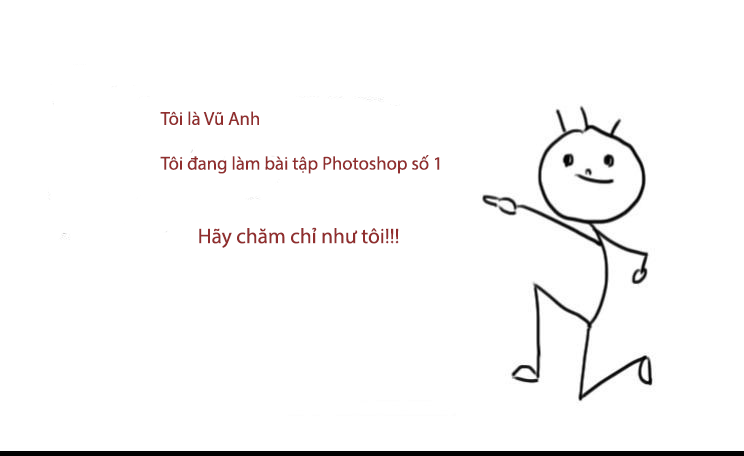
<style>
.page{position:relative;width:744px;height:456px;background:#ffffff}
.page>*{position:absolute;margin:0}
.t1{font:18.7px "MyriadPro-Regular";color:#912e2e}
.t2{font:21.3px "MyriadPro-Regular";color:#912e2e}
</style>
<div class="page">
<p class="t1" style="left:160px;top:111px;width:280px;height:137px">Tôi là Vũ Anh<br><br>Tôi đang làm bài tập Photoshop số 1<br><br><span class="t2">                                                    <br>                                                             Hãy chăm chỉ như tôi!!!</span></p>
</div>
